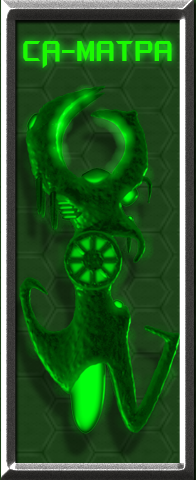
<style>
.page{position:relative;width:196px;height:480px}
.page>*{position:absolute;margin:0}
.t1{font:32.7px "AeromaticsNC";color:#1bfa02;scale:0.64 1}
</style>
<div class="page">
<p class="t1" style="left:23px;top:41px;width:149px;height:27px">CA-матра</p>
</div>
